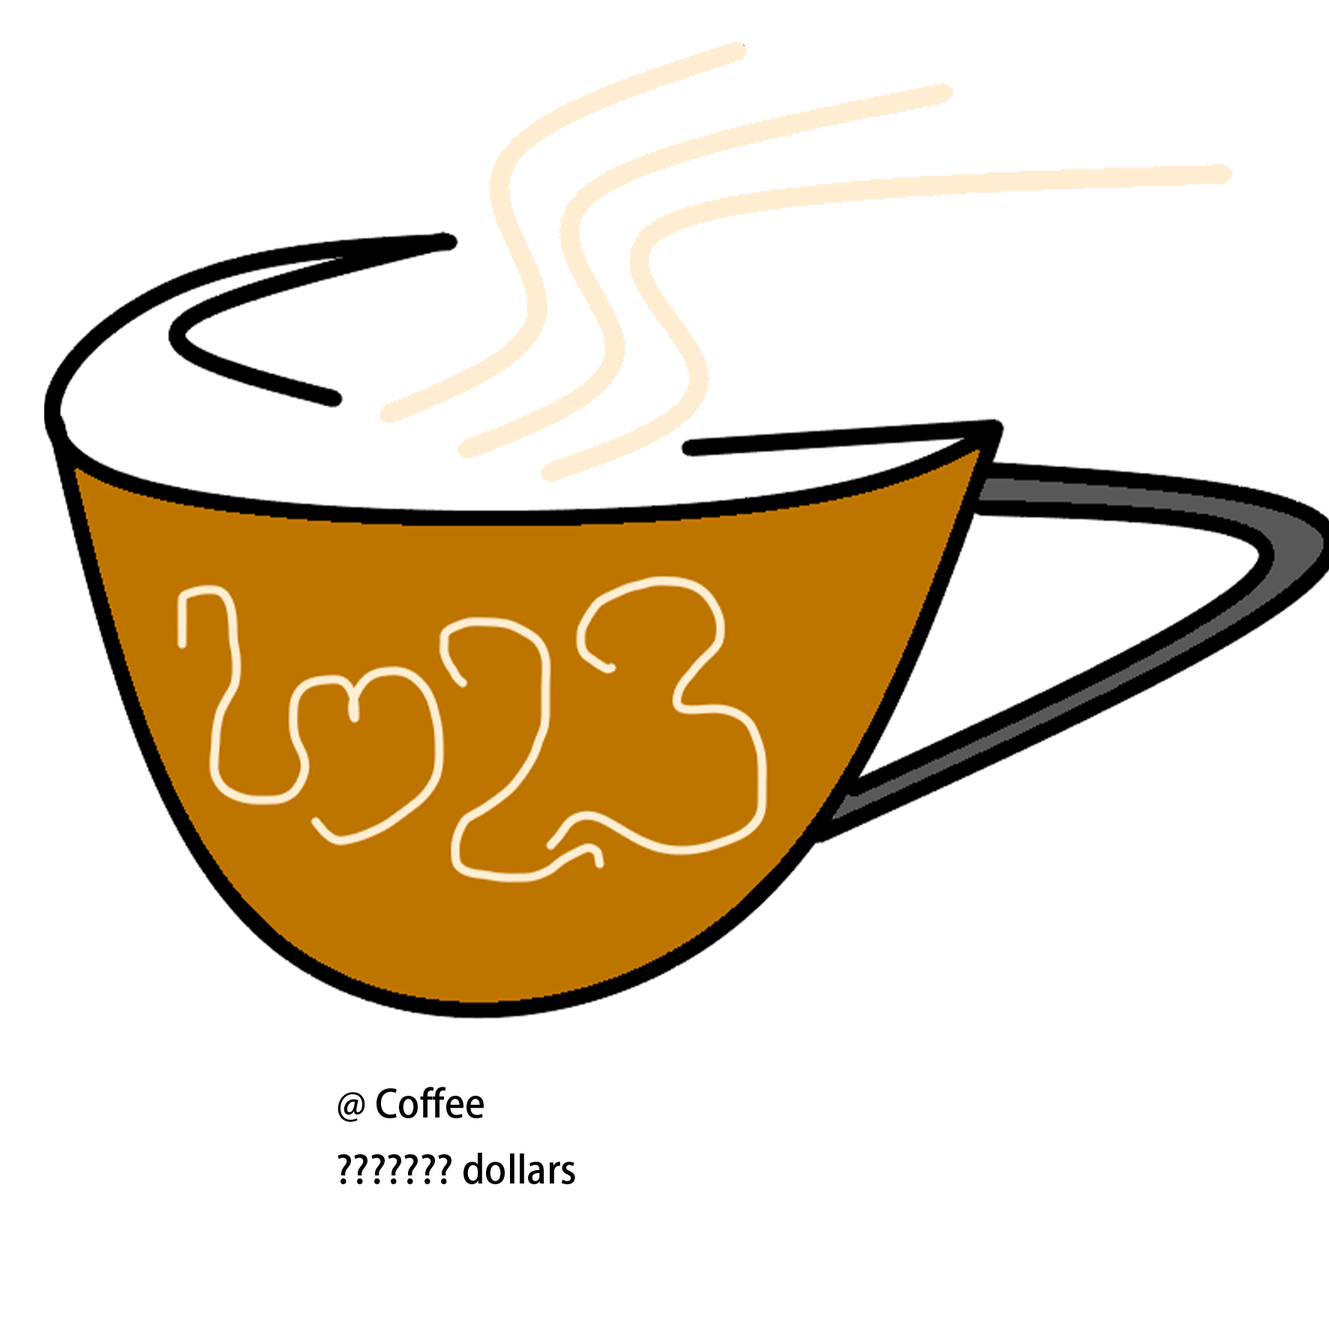
<style>
.page{position:relative;width:1329px;height:1329px;background:#ffffff}
.page>*{position:absolute;margin:0}
.t1{font:9px "AdobeFanHeitiStd-Bold";color:#000000}
</style>
<div class="page">
<p class="t1" style="left:338px;top:1087px;width:237px;height:97px">@ Coffee<br>??????? dollars</p>
</div>
